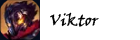
<style>
.page{position:relative;width:140px;height:40px;background:#ffffff}
.page>*{position:absolute;margin:0}
.t1{font:16px "VinerHandITC";color:#000000}
</style>
<div class="page">
<p class="t1" style="left:50px;top:12px;width:49px;height:15px">Viktor</p>
</div>
